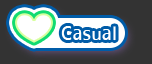
<style>
.page{position:relative;width:152px;height:64px;background:#333333}
.page>*{position:absolute;margin:0}
.t1{font:18px "JK-Gothic-M";color:#ffffff}
</style>
<div class="page">
<p class="t1" style="left:61px;top:26px;width:55px;height:15px">Casual</p>
</div>
